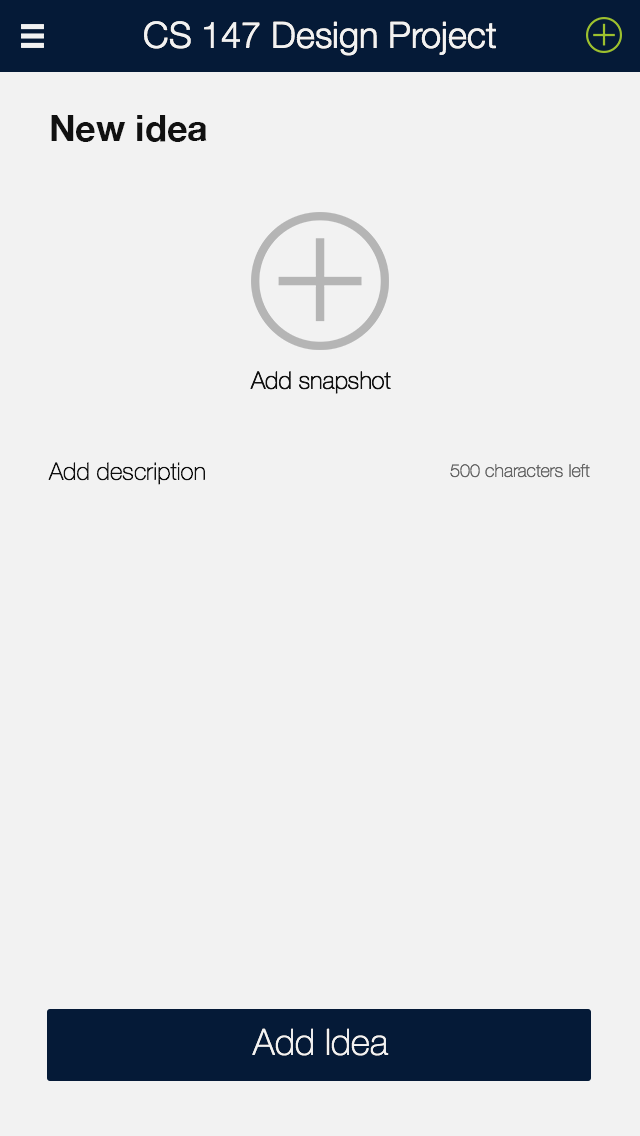
<style>
.page{position:relative;width:640px;height:1136px;background:#f2f2f2}
.page>*{position:absolute;margin:0}
.t1{font:36px "HelveticaNeue-Light";color:#f2f2f2}
.t2{font:36px "HelveticaNeue-Bold";color:#111111}
.t3{font:24px "HelveticaNeue-Thin";color:#111111}
.t4{font:18px "HelveticaNeue-Thin";color:#666666}
.t5{font:36px "HelveticaNeue-Thin";color:#f2f2f2}
</style>
<div class="page">
<p class="t1" style="left:144px;top:21px;width:352px;height:35px">CS 147 Design Project</p>
<p class="t2" style="left:51px;top:115px;width:156px;height:27px">New idea</p>
<p class="t3" style="left:250px;top:371px;width:141px;height:23px">Add snapshot</p>
<p class="t3" style="left:48px;top:462px;width:157px;height:23px">Add description</p>
<p class="t4" style="left:450px;top:463px;width:140px;height:15px">500 characters left</p>
<p class="t5" style="left:252px;top:1028px;width:137px;height:28px">Add Idea</p>
</div>
